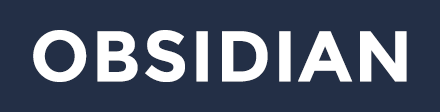
<style>
.page{position:relative;width:440px;height:112px;background:#232f46}
.page>*{position:absolute;margin:0}
.t1{font:72px "Montserrat-Bold";letter-spacing:0.025em;color:#ffffff}
</style>
<div class="page">
<p class="t1" style="left:33px;top:30px;width:374px;height:52px">OBSIDIAN</p>
</div>
